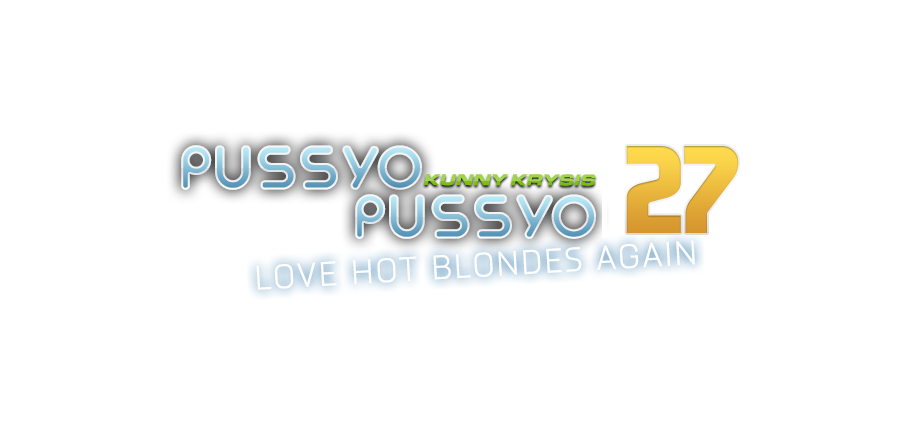
<style>
.page{position:relative;width:920px;height:430px;background:#ffffff}
.page>*{position:absolute;margin:0}
.t1{font:53px "Popping_Puzzle"}
.t2{font:123.8px "EASansCurves-Regular"}
.t3{font:16px "EurostileExt-BlaIta"}
</style>
<div class="page">
<p class="t1" style="left:181px;top:145px;width:241px;height:45px">PUSSYO</p>
<p class="t2" style="left:626px;top:146px;width:113px;height:87px">27</p>
<p class="t3" style="left:424px;top:174px;width:172px;height:12px">KUNNY KRYSIS</p>
<p class="t1" style="left:355px;top:194px;width:241px;height:45px">PUSSYO</p>
</div>
